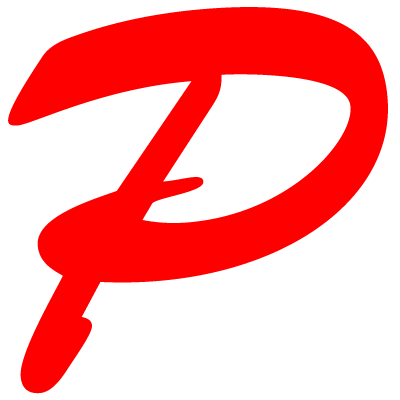
<style>
.page{position:relative;width:400px;height:400px;background:#ffffff}
.page>*{position:absolute;margin:0}
.t1{font:500.8px "BrushScriptStd";color:#ff0000;scale:1.03 1}
</style>
<div class="page">
<p class="t1" style="left:8px;top:7px;width:380px;height:387px;rotate:-4deg">P</p>
</div>
